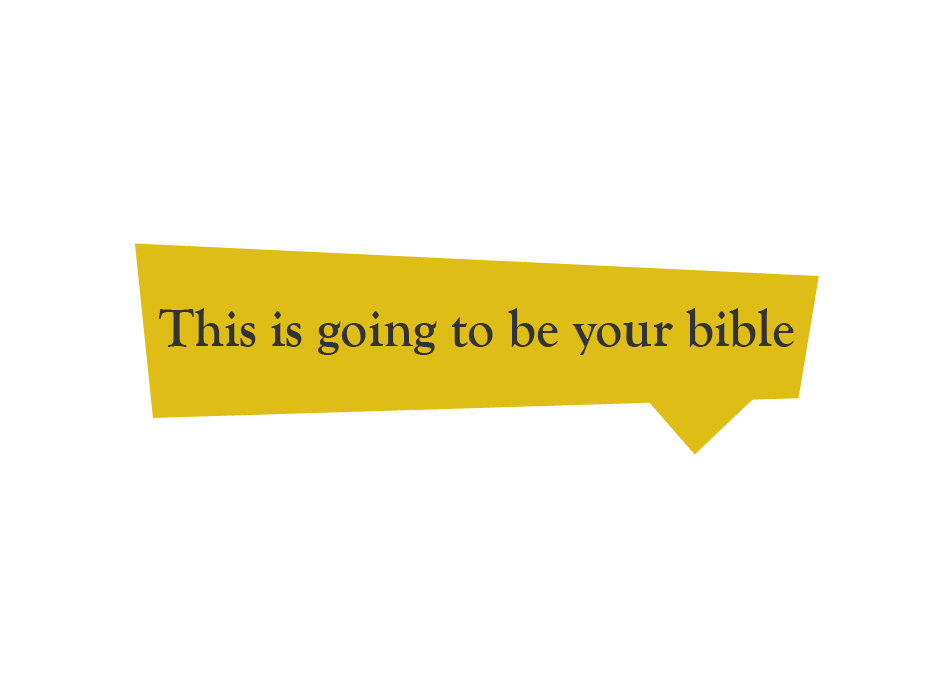
<style>
.page{position:relative;width:950px;height:700px;background:#ffffff}
.page>*{position:absolute;margin:0}
.t1{font:54.2px "GoudyOldStyleT-Bold";color:#333333}
</style>
<div class="page">
<p class="t1" style="left:159px;top:308px;width:635px;height:47px">This is going to be your bible</p>
</div>
